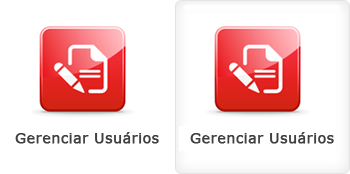
<style>
.page{position:relative;width:350px;height:174px;background:#ffffff}
.page>*{position:absolute;margin:0}
.t1{font:14.4px "Verdana";color:#404040;font-weight:bold}
</style>
<div class="page">
<p class="t1" style="left:15px;top:132px;width:144px;height:12px">Gerenciar Usuários</p>
<p class="t1" style="left:190px;top:132px;width:144px;height:12px">Gerenciar Usuários</p>
</div>
